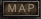
<style>
.page{position:relative;width:41px;height:19px}
.page>*{position:absolute;margin:0}
.t1{font:10.5px "Helvetica-Light";letter-spacing:0.2em;color:#8a7967}
</style>
<div class="page">
<p class="t1" style="left:8px;top:4px;width:26px;height:8px">MAP</p>
</div>
